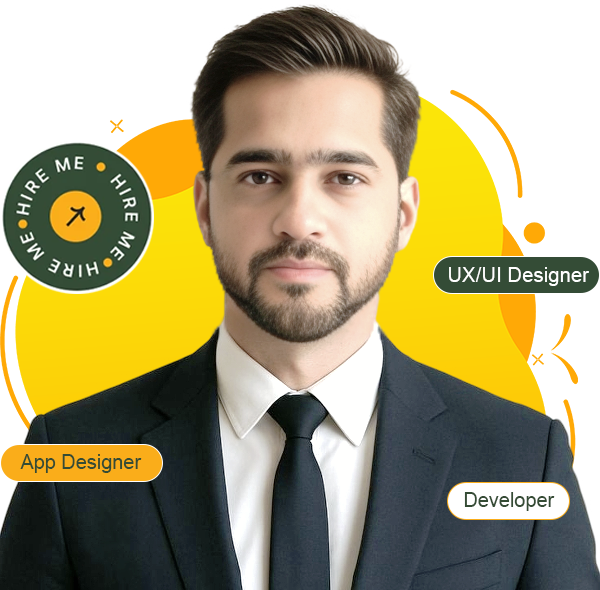
<style>
.page{position:relative;width:600px;height:590px;background:#ffffff}
.page>*{position:absolute;margin:0}
.t1{font:19.9px "ArialMT";color:#ffffff}
.t2{font:19.9px "ArialMT";color:#354c35}
</style>
<div class="page">
<p class="t1" style="left:449px;top:267px;width:140px;height:19px">UX/UI Designer</p>
<p class="t2" style="left:20px;top:454px;width:122px;height:19px">App Designer</p>
<p class="t2" style="left:464px;top:492px;width:91px;height:19px">Developer</p>
</div>
